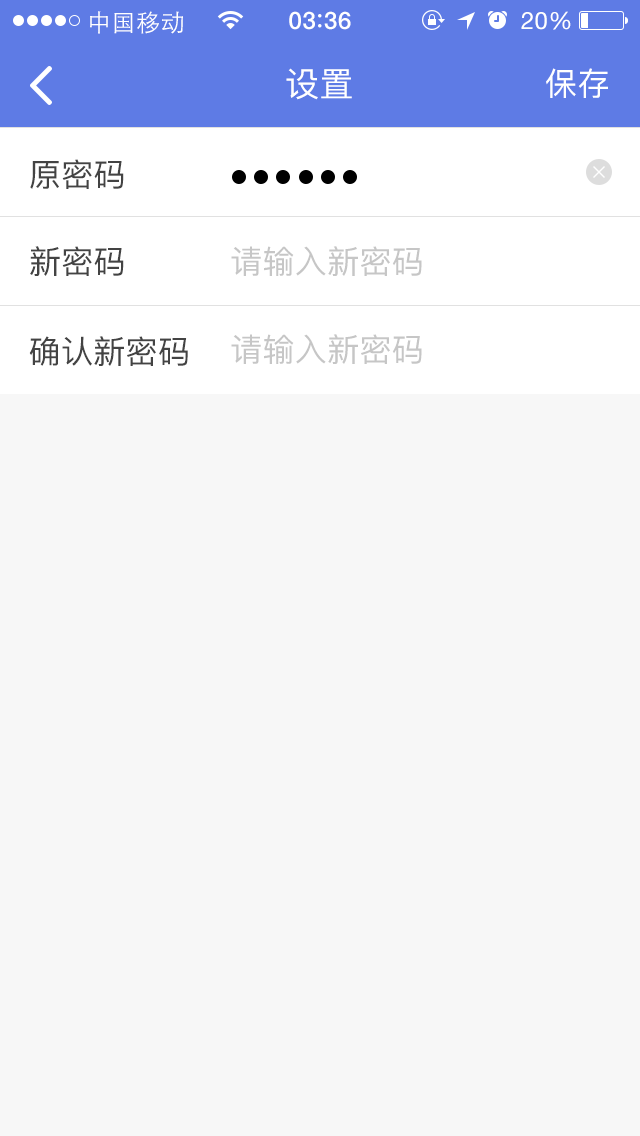
<style>
.page{position:relative;width:640px;height:1136px;background:#f7f7f7}
.page>*{position:absolute;margin:0}
.t1{font:24px "STHeitiSC-Light";letter-spacing:0.02em;color:#ffffff}
.t2{font:24px "HelveticaNeue-Medium";letter-spacing:0.03em;color:#ffffff}
.t3{font:24px "HelveticaNeue";letter-spacing:0.02em;color:#ffffff}
.t4{font:34px "PingFangSC-Regular";letter-spacing:0.01em;color:#ffffff}
.t5{font:32px "PingFangSC-Regular";letter-spacing:0.01em;color:#ffffff}
.t6{font:32px "PingFangSC-Regular";letter-spacing:0.01em;color:#434343}
.t7{font:32px "PingFangSC-Regular";letter-spacing:0.01em;color:#c6c6c6}
</style>
<div class="page">
<p class="t1" style="left:90px;top:11px;width:93px;height:23px">中国移动</p>
<p class="t2" style="left:289px;top:11px;width:62px;height:19px">03 36</p>
<p class="t3" style="left:521px;top:11px;width:50px;height:19px">20%</p>
<p class="t4" style="left:286px;top:68px;width:66px;height:32px">设置</p>
<p class="t5" style="left:546px;top:68px;width:62px;height:30px">保存</p>
<p class="t6" style="left:30px;top:159px;width:94px;height:30px">原密码</p>
<p class="t6" style="left:30px;top:246px;width:94px;height:30px">新密码</p>
<p class="t7" style="left:231px;top:246px;width:191px;height:30px">请输入新密码</p>
<p class="t6" style="left:29px;top:336px;width:159px;height:30px">确认新密码</p>
<p class="t7" style="left:231px;top:334px;width:191px;height:30px">请输入新密码</p>
</div>
